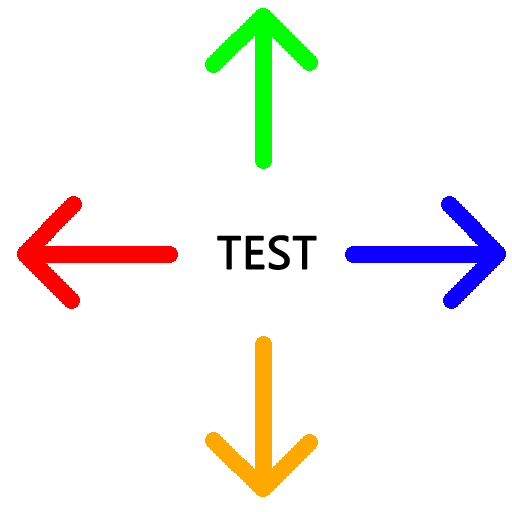
<style>
.page{position:relative;width:512px;height:512px;background:#ffffff}
.page>*{position:absolute;margin:0}
.t1{font:46px "MicrosoftNewTaiLue";color:#000000;font-weight:bold}
</style>
<div class="page">
<p class="t1" style="left:217px;top:235px;width:100px;height:35px">TEST</p>
</div>
